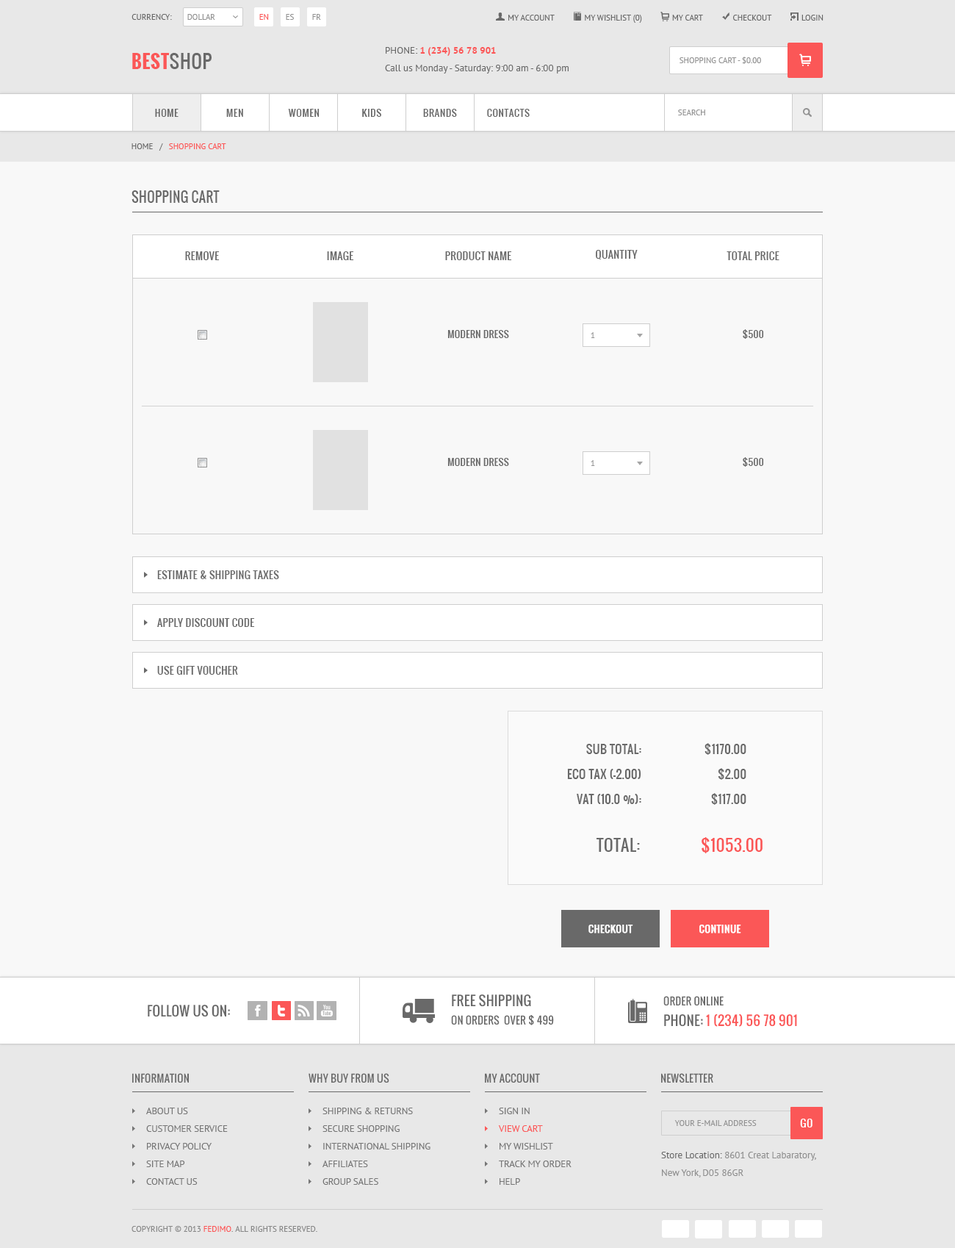
<style>
.page{position:relative;width:955px;height:1248px;background:#f8f8f8}
.page>*{position:absolute;margin:0}
.t1{font:8.1px "PTSans-Regular";color:#696969;text-transform:uppercase}
.t2{font:8.1px "PTSans-Regular";color:#939393;text-transform:uppercase}
.t3{font:8.1px "PTSans-Regular";color:#fb5757;text-transform:uppercase}
.t4{font:18.4px "Oswald-Bold";letter-spacing:0.025em;color:#fb5757;text-transform:uppercase}
.t5{font:18.4px "Oswald-Regular";letter-spacing:0.025em;color:#696969;text-transform:uppercase}
.t6{font:9.6px/17.6px "PTSans-Regular";color:#696969}
.t7{font:9.6px/17.6px "PTSans-Regular";color:#696969;text-transform:uppercase}
.t8{font:9.6px/17.6px "PTSans-Bold";color:#fb5757;text-transform:uppercase}
.t9{font:9.6px "Oswald-Regular";letter-spacing:0.05em;color:#696969;text-transform:uppercase}
.t10{font:13.2px "Oswald-Regular";letter-spacing:0.015em;color:#696969;text-transform:uppercase}
.t11{font:10.3px "Oswald-Regular";letter-spacing:0.025em;color:#696969;text-transform:uppercase}
.t12{font:9.6px "Oswald-Regular";letter-spacing:0.025em;color:#696969}
.t13{font:9.6px "Oswald-Regular";letter-spacing:0.025em;color:#696969;text-transform:uppercase}
.t14{font:8.1px "PTSans-Regular";color:#979797}
.t15{font:11.8px/25px "Oswald-Regular";letter-spacing:0.025em;color:#696969;text-transform:uppercase}
.t16{font:16.2px "Oswald-Regular";letter-spacing:0.025em;color:#696969;text-transform:uppercase}
.t17{font:16.2px "Oswald-Regular";letter-spacing:0.025em;color:#fb5757;text-transform:uppercase}
.t18{font:9.6px "Oswald-Regular";letter-spacing:0.025em;color:#ffffff;text-transform:uppercase;font-weight:bold}
.t19{font:10.3px/18.4px "Oswald-Regular";letter-spacing:0.015em;color:#696969;text-transform:uppercase}
.t20{font:13.2px/20.6px "Oswald-Regular";letter-spacing:0.015em;color:#fb5757;text-transform:uppercase}
.t21{font:10.3px "Oswald-Regular";letter-spacing:0.015em;color:#696969;text-transform:uppercase}
.t22{font:13.2px/20.6px "Oswald-Regular";letter-spacing:0.015em;color:#696969;text-transform:uppercase}
.t23{font:9.6px/17.6px "PTSans-Regular";color:#767676;text-transform:uppercase}
.t24{font:9.6px/17.6px "PTSans-Regular";color:#fb5757;text-transform:uppercase}
.t25{font:10.3px "Oswald-Regular";letter-spacing:0.05em;color:#ffffff;text-transform:uppercase}
.t26{font:9.6px/17.6px "PTSans-Regular";color:#8f8f8f}
.t27{font:8.1px "PTSans-Regular";color:#888888;text-transform:uppercase}
</style>
<div class="page">
<p class="t1" style="left:132px;top:14px;width:40px;height:6px">Currency:</p>
<p class="t2" style="left:187px;top:14px;width:28px;height:6px">Dollar</p>
<p class="t3" style="left:259px;top:14px;width:10px;height:6px">En</p>
<p class="t2" style="left:286px;top:14px;width:8px;height:6px">Es</p>
<p class="t2" style="left:312px;top:14px;width:9px;height:6px">Fr</p>
<p class="t1" style="left:509px;top:15px;width:315px;height:8px">My Account              My Wishlist (0)              My Cart              Checkout              Login</p>
<p class="t4" style="left:132px;top:53px;width:80px;height:16px">Best<span class="t5">Shop</span></p>
<p class="t6" style="left:385px;top:47px;width:184px;height:26px"><span class="t7">Phone: </span><span class="t8">1 (234) 56 78 901<br></span>Call us Monday - Saturday: 9:00 am - 6:00 pm</p>
<p class="t2" style="left:680px;top:57px;width:81px;height:7px">Shopping Cart - $0.00</p>
<p class="t9" style="left:155px;top:109px;width:24px;height:8px">Home</p>
<p class="t9" style="left:226px;top:109px;width:17px;height:8px">Men</p>
<p class="t9" style="left:288px;top:109px;width:32px;height:8px">Women</p>
<p class="t9" style="left:362px;top:109px;width:19px;height:8px">Kids</p>
<p class="t9" style="left:423px;top:109px;width:34px;height:8px">Brands</p>
<p class="t9" style="left:487px;top:109px;width:43px;height:8px">Contacts</p>
<p class="t2" style="left:678px;top:110px;width:28px;height:5px">Search</p>
<p class="t3" style="left:132px;top:143px;width:94px;height:8px"><span class="t1">Home   /   </span>Shopping cart</p>
<p class="t10" style="left:132px;top:190px;width:88px;height:13px">Shopping cart</p>
<p class="t11" style="left:185px;top:251px;width:35px;height:9px">Remove</p>
<p class="t11" style="left:327px;top:251px;width:27px;height:9px">Image</p>
<p class="t11" style="left:445px;top:251px;width:67px;height:9px">Product Name</p>
<p class="t11" style="left:596px;top:250px;width:42px;height:9px">Quantity</p>
<p class="t11" style="left:727px;top:251px;width:53px;height:9px">Total Price</p>
<p class="t12" style="left:743px;top:329px;width:21px;height:10px">$500</p>
<p class="t13" style="left:448px;top:330px;width:61px;height:8px">Modern Dress</p>
<p class="t14" style="left:591px;top:332px;width:4px;height:6px">1</p>
<p class="t13" style="left:448px;top:458px;width:61px;height:8px">Modern Dress</p>
<p class="t14" style="left:591px;top:460px;width:4px;height:6px">1</p>
<p class="t12" style="left:743px;top:457px;width:21px;height:10px">$500</p>
<p class="t11" style="left:157px;top:570px;width:122px;height:9px">Estimate &amp; Shipping Taxes</p>
<p class="t11" style="left:157px;top:618px;width:98px;height:9px">Apply Discount Code</p>
<p class="t11" style="left:157px;top:666px;width:81px;height:9px">Use Gift Voucher</p>
<p class="t15" style="left:567px;top:744px;width:75px;height:60px;text-align:right">Sub Total:<br>Eco tax (-2.00)<br>Vat (10.0 %):</p>
<p class="t15" style="left:705px;top:743px;width:42px;height:62px;text-align:right">$1170.00<br>$2.00<br>$117.00</p>
<p class="t16" style="left:597px;top:838px;width:43px;height:14px">Total:</p>
<p class="t17" style="left:702px;top:837px;width:61px;height:16px">$1053.00</p>
<p class="t18" style="left:589px;top:925px;width:45px;height:8px">Checkout</p>
<p class="t18" style="left:700px;top:925px;width:42px;height:8px">Continue</p>
<p class="t19" style="left:451px;top:994px;width:103px;height:31px"><span class="t10">Free Shipping<br></span>On Orders  Over $ 499</p>
<p class="t20" style="left:664px;top:996px;width:133px;height:31px"><span class="t21">Order Online<br></span><span class="t22">Phone: </span>1 (234) 56 78 901</p>
<p class="t10" style="left:148px;top:1005px;width:82px;height:12px">Follow Us On:</p>
<p class="t21" style="left:132px;top:1073px;width:57px;height:10px">Information</p>
<p class="t21" style="left:309px;top:1073px;width:81px;height:10px">Why Buy From Us</p>
<p class="t21" style="left:485px;top:1073px;width:55px;height:10px">My Account</p>
<p class="t21" style="left:661px;top:1073px;width:53px;height:10px">Newsletter</p>
<p class="t23" style="left:146px;top:1108px;width:82px;height:77px">About Us<br>Customer Service<br>Privacy Policy<br>Site Map<br>Contact Us</p>
<p class="t23" style="left:323px;top:1108px;width:108px;height:77px">Shipping &amp; Returns<br>Secure Shopping<br>International Shipping<br>Affiliates<br>Group Sales</p>
<p class="t23" style="left:498px;top:1108px;width:74px;height:77px">Sign In<br><span class="t24">View Cart<br></span>My Wishlist<br>Track My Order<br>Help</p>
<p class="t2" style="left:675px;top:1120px;width:82px;height:6px">Your E-mail address</p>
<p class="t25" style="left:800px;top:1119px;width:13px;height:8px">Go</p>
<p class="t26" style="left:661px;top:1152px;width:156px;height:25px"><span class="t6">Store Location:</span> 8601 Creat Labaratory, <br>New York, D05 86GR</p>
<p class="t27" style="left:132px;top:1226px;width:186px;height:6px">Copyright © 2013 <span class="t3">Fedimo</span>. All rights reserved.</p>
</div>
